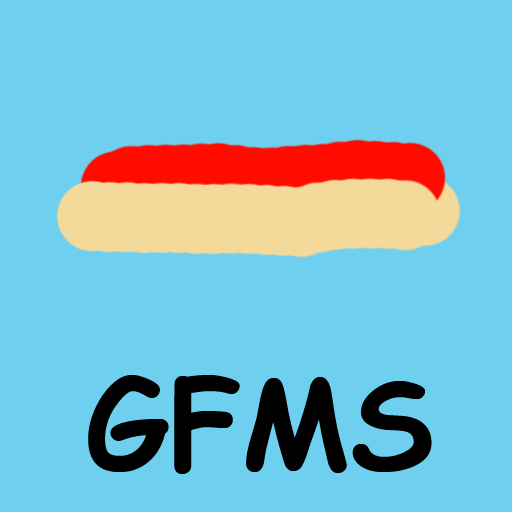
<style>
.page{position:relative;width:512px;height:512px;background:#6fcfee}
.page>*{position:absolute;margin:0}
.t1{font:121.3px "ComicSansMS-Bold";color:#000000}
</style>
<div class="page">
<p class="t1" style="left:88px;top:375px;width:344px;height:99px">GFMS</p>
</div>
